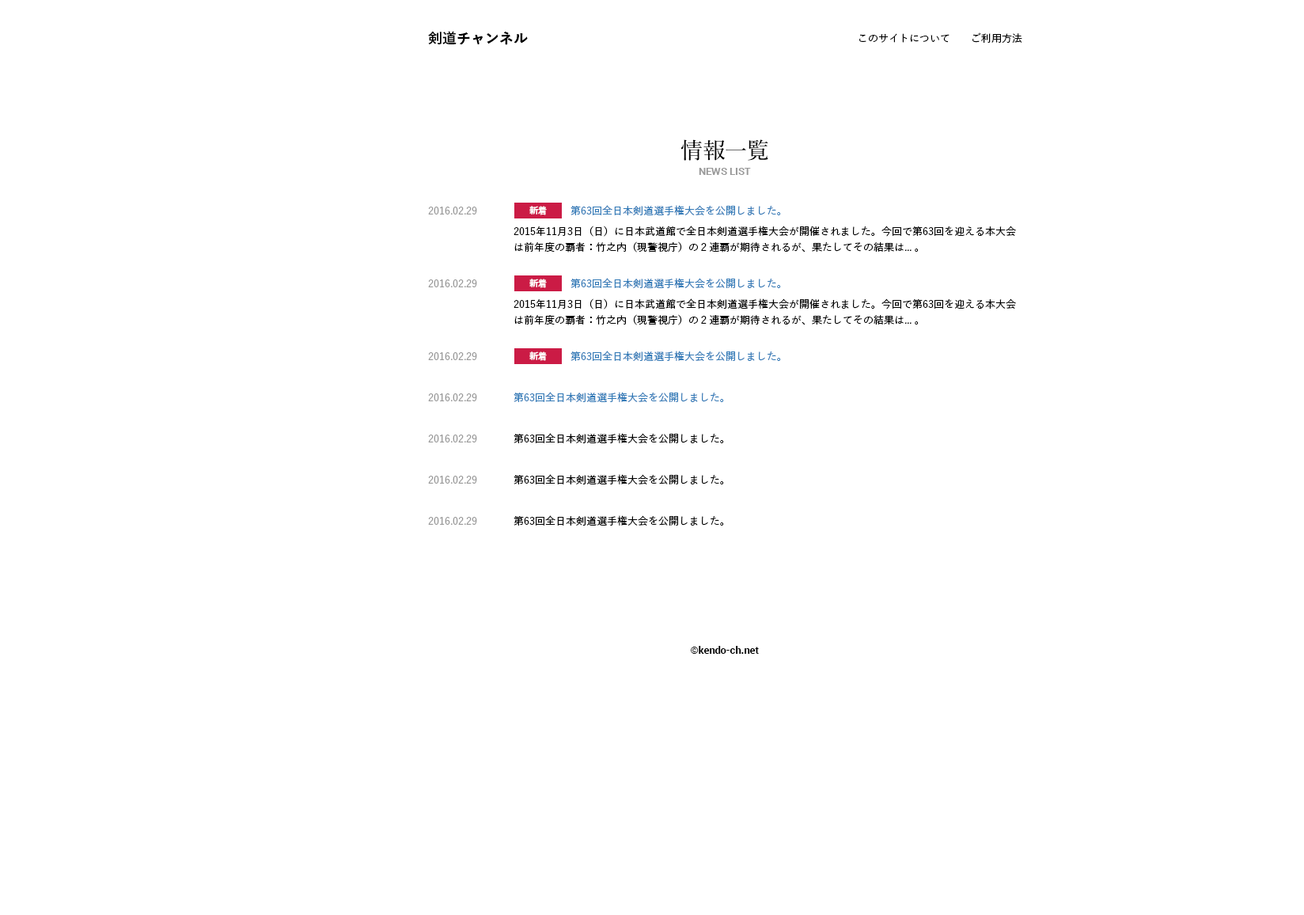
<style>
.page{position:relative;width:1304px;height:915px;background:#ffffff}
.page>*{position:absolute;margin:0}
.t1{font:14.2px "YuGo-Bold";color:#000000}
.t2{font:10.3px "YuGo-Medium";color:#000000}
.t3{font:22.2px "YuMin-Medium";color:#000000}
.t4{font:10.3px "Roboto-Bold";color:#999999}
.t5{font:10.3px/15.8px "YuGo-Medium";color:#000000}
.t6{font:10.3px/20.6px "YuGo-Medium";color:#999999}
.t7{font:10.3px/20.6px "YuGo-Medium";color:#337ab7}
.t8{font:10.3px/20.6px "YuGo-Medium";color:#000000}
.t9{font:8.7px "YuGo-Bold";color:#ffffff}
.t10{font:10.3px "Roboto-Bold";color:#000000}
</style>
<div class="page">
<p class="t1" style="left:428px;top:31px;width:100px;height:14px">剣道チャンネル</p>
<p class="t2" style="left:859px;top:32px;width:163px;height:11px">このサイトについて　　ご利用方法</p>
<p class="t3" style="left:680px;top:139px;width:88px;height:22px">情報一覧</p>
<p class="t4" style="left:699px;top:168px;width:52px;height:7px">NEWS LIST</p>
<p class="t5" style="left:428px;top:205px;width:588px;height:320px"><span class="t6">2016.02.29    </span><span class="t7">第63回全日本剣道選手権大会を公開しました。<br>   </span>2015年11月3日（日）に日本武道館で全日本剣道選手権大会が開催されました。今回で第63回を迎える本大会    は前年度の覇者：竹之内（現警視庁）の２連覇が期待されるが、果たしてその結果は... 。<br><br><span class="t6">2016.02.29    </span><span class="t7">第63回全日本剣道選手権大会を公開しました。<br>   </span>2015年11月3日（日）に日本武道館で全日本剣道選手権大会が開催されました。今回で第63回を迎える本大会    は前年度の覇者：竹之内（現警視庁）の２連覇が期待されるが、果たしてその結果は... 。<br><br><span class="t6">2016.02.29    </span><span class="t7">第63回全日本剣道選手権大会を公開しました。<br><br></span><span class="t6">2016.02.29  </span><span class="t7">第63回全日本剣道選手権大会を公開しました。<br><br></span><span class="t6">2016.02.29  </span><span class="t8">第63回全日本剣道選手権大会を公開しました。<br><br></span><span class="t6">2016.02.29  </span><span class="t8">第63回全日本剣道選手権大会を公開しました。<br><br></span><span class="t6">2016.02.29  </span><span class="t8">第63回全日本剣道選手権大会を公開しました。</span></p>
<p class="t9" style="left:529px;top:206px;width:18px;height:9px">新着</p>
<p class="t9" style="left:529px;top:278px;width:18px;height:10px">新着</p>
<p class="t9" style="left:529px;top:351px;width:18px;height:10px">新着</p>
<p class="t10" style="left:690px;top:646px;width:69px;height:7px">©kendo-ch.net</p>
</div>
